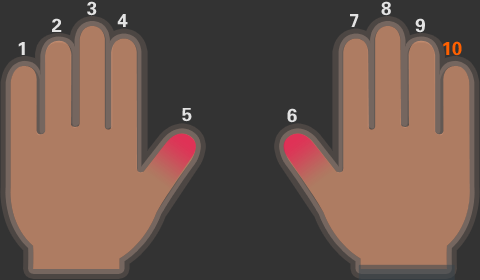
<style>
.page{position:relative;width:480px;height:280px;background:#333333}
.page>*{position:absolute;margin:0}
.t1{font:18.6px "FZDHTJW--GB1-0";color:#e3e3e3}
.t2{font:18.6px "FZDHTJW--GB1-0";color:#ff6000}
</style>
<div class="page">
<p class="t1" style="left:87px;top:1px;width:10px;height:15px">3</p>
<p class="t1" style="left:381px;top:1px;width:10px;height:15px">8</p>
<p class="t1" style="left:117px;top:14px;width:11px;height:13px">4</p>
<p class="t1" style="left:350px;top:14px;width:9px;height:13px">7</p>
<p class="t1" style="left:52px;top:18px;width:10px;height:14px">2</p>
<p class="t1" style="left:415px;top:18px;width:10px;height:15px">9</p>
<p class="t2" style="left:443px;top:41px;width:19px;height:15px">10</p>
<p class="t1" style="left:18px;top:42px;width:7px;height:13px">1</p>
<p class="t1" style="left:182px;top:108px;width:10px;height:14px">5</p>
<p class="t1" style="left:287px;top:108px;width:10px;height:15px">6</p>
</div>
